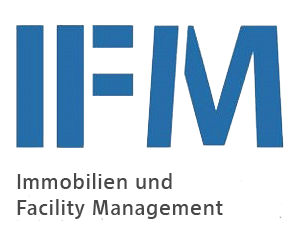
<style>
.page{position:relative;width:300px;height:250px;background:#ffffff}
.page>*{position:absolute;margin:0}
.t1{font:21.3px "TUText-Regular";color:#494848}
</style>
<div class="page">
<p class="t1" style="left:17px;top:173px;width:206px;height:46px">Immobilien und<br>Facility Management</p>
</div>
